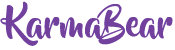
<style>
.page{position:relative;width:175px;height:50px;background:#ffffff}
.page>*{position:absolute;margin:0}
.t1{font:36px "BeyondTheMountains";color:#551a8b}
</style>
<div class="page">
<p class="t1" style="left:0px;top:1px;width:173px;height:45px">KarmaBear</p>
</div>
